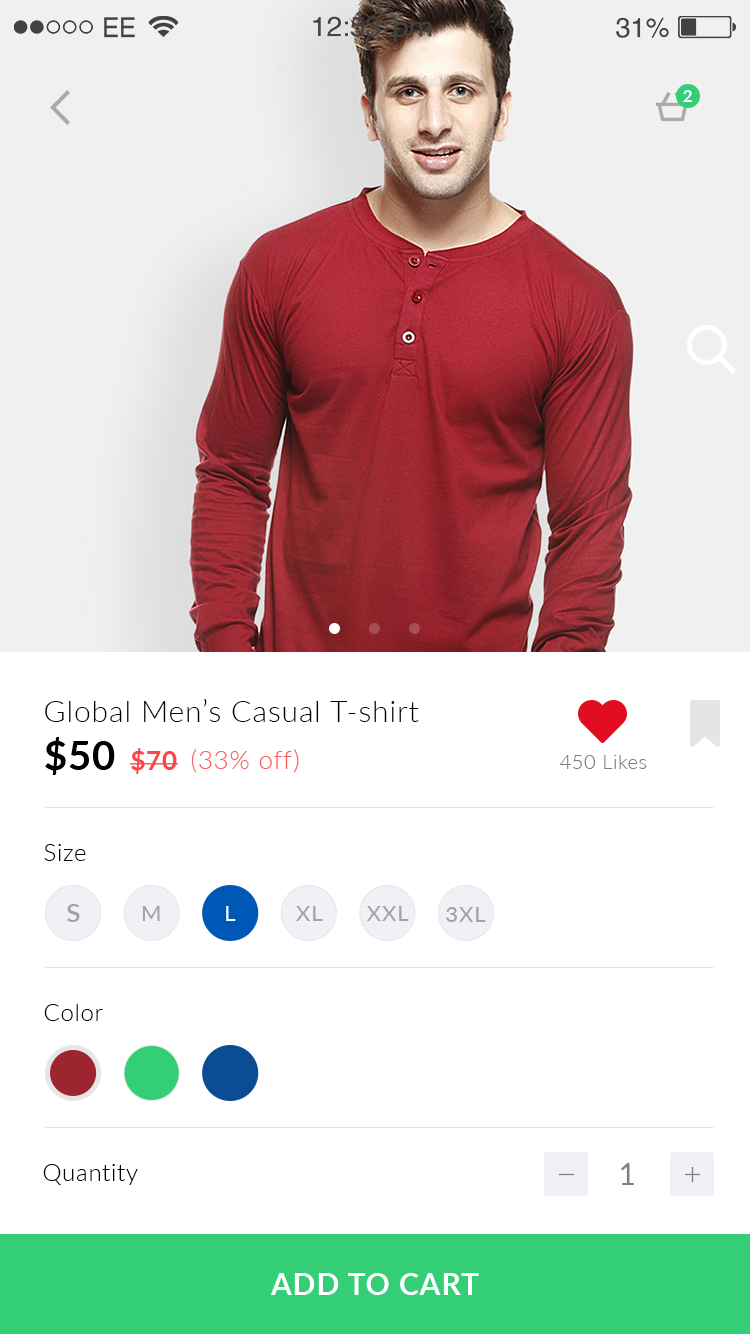
<style>
.page{position:relative;width:750px;height:1334px;background:#ffffff}
.page>*{position:absolute;margin:0}
.t1{font:17px "Lato-Bold";letter-spacing:0.03em;color:#ffffff}
.t2{font:30px "Lato-Light";letter-spacing:0.03em;color:#000000}
.t3{font:40px "Lato-Bold";letter-spacing:0.03em;color:#000000}
.t4{font:26px "Lato-Bold";letter-spacing:0.03em;color:#fb4646}
.t5{font:26px "Lato-Light";letter-spacing:0.03em;color:#fb6161}
.t6{font:20px "Lato-Light";letter-spacing:0.03em;color:#7f7f7f}
.t7{font:24px "Lato-Light";letter-spacing:0.03em;color:#000000}
.t8{font:33.6px "Lato-Regular";letter-spacing:0.03em;color:#a2a2a2}
.t9{font:22.4px "Lato-Regular";letter-spacing:0.03em;color:#a2a2a2}
.t10{font:22.4px "Lato-Regular";letter-spacing:0.03em;color:#ffffff}
.t11{font:30px "Lato-Regular";letter-spacing:0.03em;color:#7f7f7f}
.t12{font:30px "Lato-Bold";letter-spacing:0.03em;color:#ffffff;text-transform:uppercase}
</style>
<div class="page">
<p class="t1" style="left:683px;top:90px;width:9px;height:12px">2</p>
<p class="t2" style="left:45px;top:699px;width:374px;height:23px">Global Men’s Casual T-shirt</p>
<p class="t3" style="left:45px;top:737px;width:70px;height:38px">$50</p>
<p class="t4" style="left:130px;top:748px;width:48px;height:26px">$70</p>
<p class="t5" style="left:191px;top:749px;width:108px;height:24px">(33% off)</p>
<p class="t6" style="left:560px;top:755px;width:87px;height:14px">450 Likes</p>
<p class="t7" style="left:44px;top:844px;width:42px;height:17px">Size</p>
<p class="t8" style="left:67px;top:904px;width:13px;height:18px">s</p>
<p class="t9" style="left:142px;top:906px;width:18px;height:15px">M</p>
<p class="t10" style="left:226px;top:906px;width:10px;height:15px">L</p>
<p class="t9" style="left:296px;top:906px;width:27px;height:15px">XL</p>
<p class="t9" style="left:367px;top:906px;width:42px;height:15px">XXL</p>
<p class="t9" style="left:446px;top:907px;width:40px;height:15px">3XL</p>
<p class="t7" style="left:44px;top:1004px;width:59px;height:17px">Color</p>
<p class="t7" style="left:43px;top:1164px;width:95px;height:21px">Quantity</p>
<p class="t11" style="left:621px;top:1163px;width:13px;height:22px">1</p>
<p class="t12" style="left:270px;top:1273px;width:209px;height:22px">Add to cart</p>
</div>
